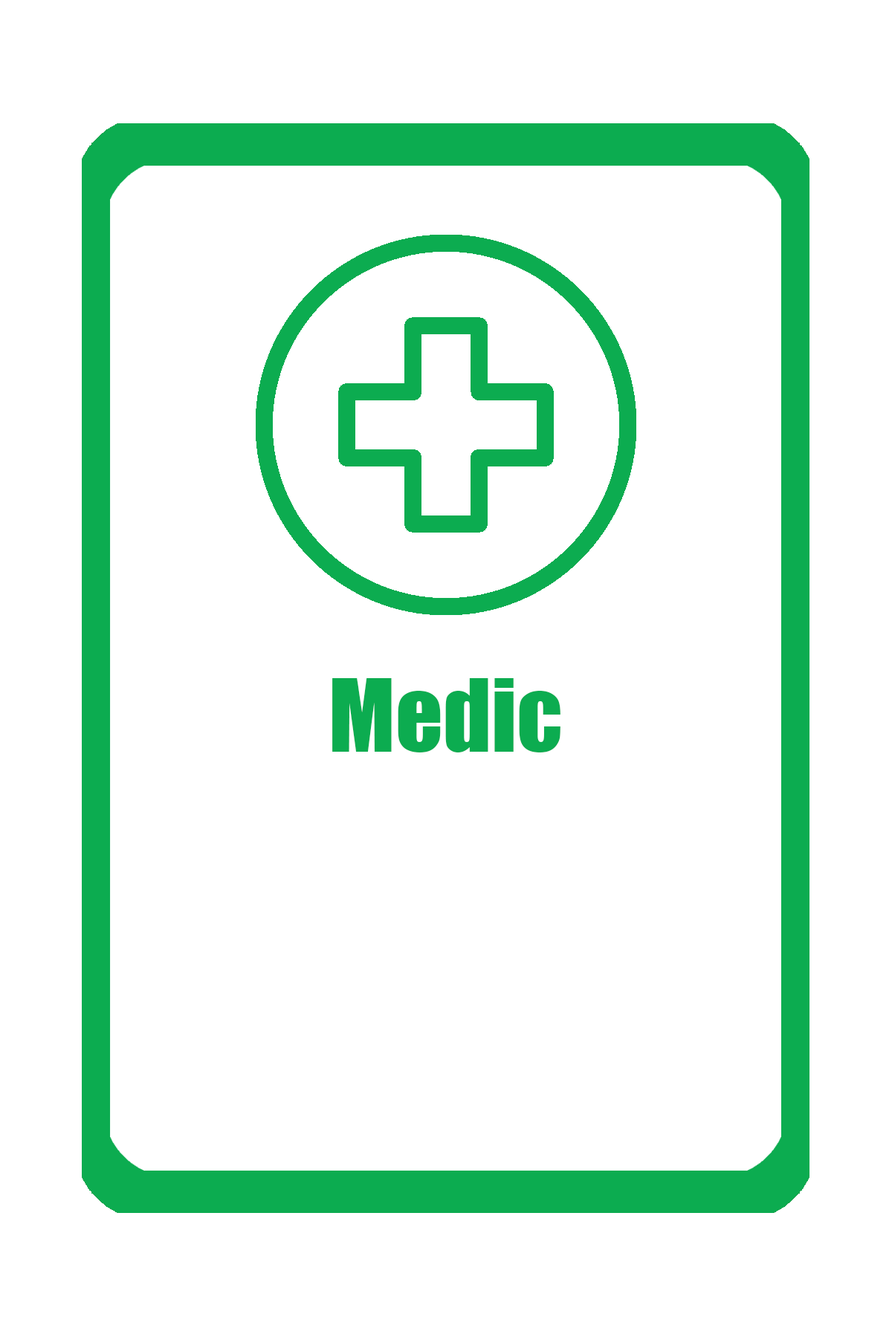
<style>
.page{position:relative;width:892px;height:1337px;background:#ffffff}
.page>*{position:absolute;margin:0}
.t1{font:92.9px "Impact";color:#0cac50}
</style>
<div class="page">
<p class="t1" style="left:332px;top:678px;width:228px;height:75px">Medic</p>
</div>
